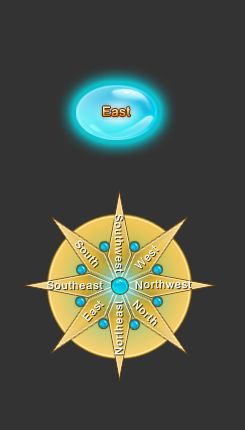
<style>
.page{position:relative;width:245px;height:430px;background:#333333}
.page>*{position:absolute;margin:0}
.t1{font:13px "ArialMT";letter-spacing:0.05em}
.t2{font:11px "ArialMT";letter-spacing:0.075em;color:#ffffff}
</style>
<div class="page">
<p class="t1" style="left:103px;top:106px;width:27px;height:11px">East</p>
<p class="t2" style="left:114px;top:214px;width:10px;height:59px;rotate:89deg">Southwest</p>
<p class="t2" style="left:74px;top:240px;width:24px;height:27px;rotate:49deg">South</p>
<p class="t2" style="left:134px;top:245px;width:25px;height:24px;rotate:-46deg">West</p>
<p class="t2" style="left:46px;top:280px;width:57px;height:10px;rotate:-1deg">Southeast</p>
<p class="t2" style="left:135px;top:279px;width:57px;height:11px">Northwest</p>
<p class="t2" style="left:82px;top:300px;width:22px;height:22px;rotate:-48deg">East</p>
<p class="t2" style="left:114px;top:300px;width:9px;height:55px;rotate:-90deg">Northeast</p>
<p class="t2" style="left:132px;top:299px;width:25px;height:27px;rotate:44deg">North</p>
</div>
